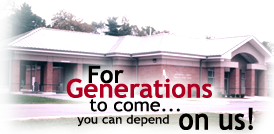
<style>
.page{position:relative;width:274px;height:134px;background:#ffffff}
.page>*{position:absolute;margin:0}
.t1{font:24px "TrebuchetMS-Bold";color:#030000}
.t2{font:26px "TrebuchetMS-Bold";color:#ad0021}
.t3{font:17.9px "TrebuchetMS";color:#030000;scale:1.09 1}
.t4{font:30px "TrebuchetMS-Bold";color:#030000;scale:0.9 1}
.t5{font:12px "TrebuchetMS";color:#030000;scale:1.09 1}
</style>
<div class="page">
<p class="t1" style="left:88px;top:65px;width:36px;height:19px">For</p>
<p class="t2" style="left:66px;top:78px;width:146px;height:20px">Generations</p>
<p class="t3" style="left:89px;top:99px;width:91px;height:13px">to come...</p>
<p class="t4" style="left:179px;top:107px;width:74px;height:23px">on us!</p>
<p class="t5" style="left:77px;top:114px;width:92px;height:13px">you can depend</p>
</div>
